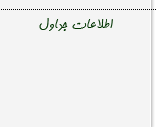
<style>
.page{position:relative;width:156px;height:127px;background:#f4f4f4}
.page>*{position:absolute;margin:0}
.t1{font:18px "BKamranBold";color:#003300}
</style>
<div class="page">
<p class="t1" style="left:37px;top:12px;width:77px;height:31px;text-align:center">اطلاعات جداول</p>
</div>
